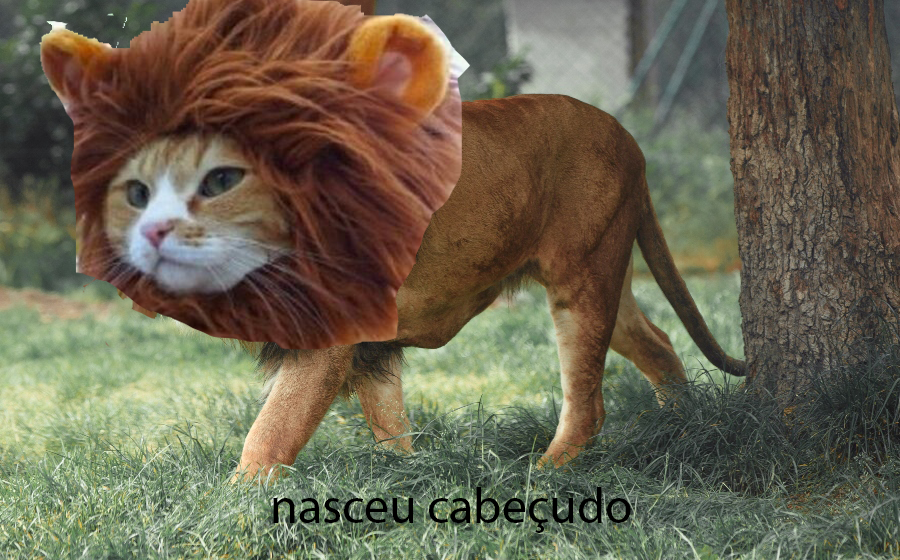
<style>
.page{position:relative;width:900px;height:560px}
.page>*{position:absolute;margin:0}
.t1{font:12px "MyriadPro-Regular";color:#000000}
</style>
<div class="page">
<p class="t1" style="left:273px;top:487px;width:358px;height:46px">nasceu cabeçudo</p>
</div>
